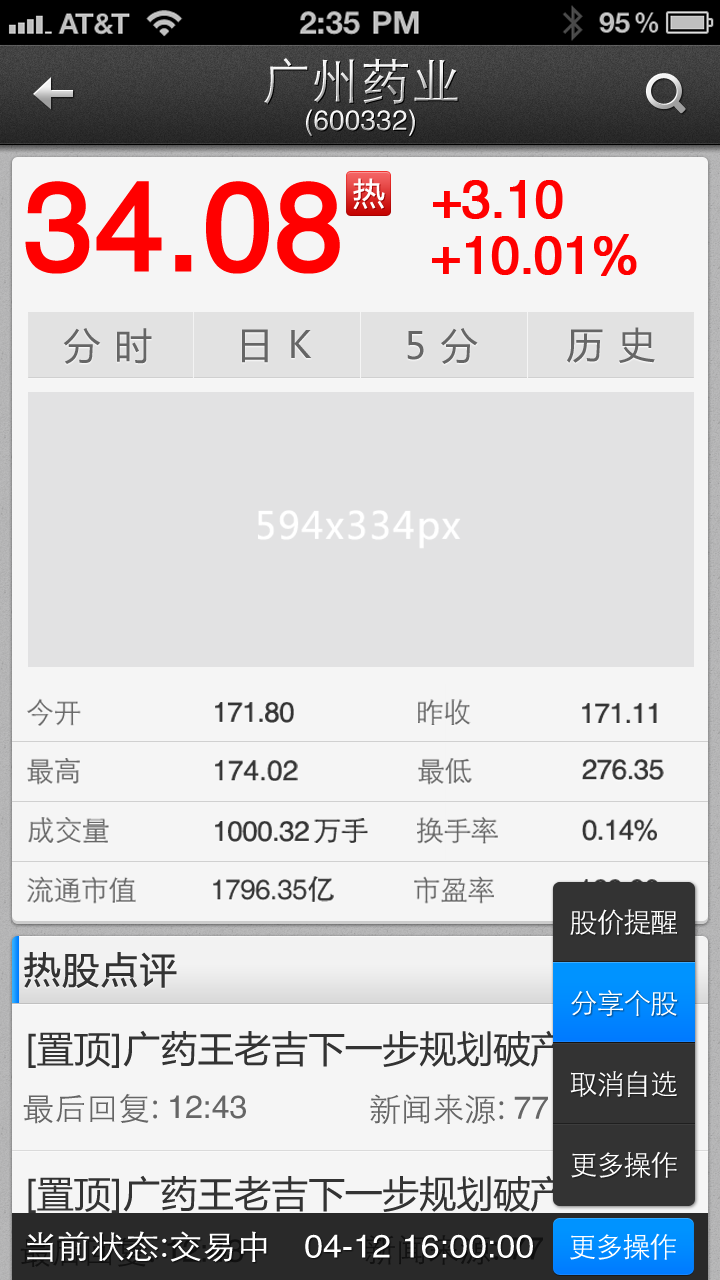
<style>
.page{position:relative;width:720px;height:1280px;background:#f5f5f5}
.page>*{position:absolute;margin:0}
.t1{font:50px "STXihei";letter-spacing:0.005em}
.t2{font:28px "HelveticaCE-Regular";letter-spacing:0.005em}
.t3{font:124px "HelveticaCE-Regular";letter-spacing:-0.01em;color:#ff0000;font-weight:bold}
.t4{font:32px "MicrosoftYaHei";letter-spacing:0.05em;color:#ffffff}
.t5{font:52px "HelveticaCE-Regular";letter-spacing:-0.025em;color:#ff0000;font-weight:bold}
.t6{font:37px "MicrosoftYaHei";letter-spacing:0.05em;color:#666666}
.t7{font:37.1px "MicrosoftYaHei";letter-spacing:0.05em;color:#ffffff}
.t8{font:28.1px "STXihei";letter-spacing:-0.025em;color:#676767}
.t9{font:28.1px "HelveticaCE-Regular";letter-spacing:-0.025em;color:#333333}
.t10{font:28.1px "STXihei";letter-spacing:-0.025em;color:#666666}
.t11{font:28.1px "HelveticaCE-Regular";color:#333333}
.t12{font:28.1px "STXihei";letter-spacing:-0.025em;color:#333333}
.t13{font:28.1px "AdobeHeitiStd-Regular";letter-spacing:-0.025em;color:#333333}
.t14{font:28px "STXihei";letter-spacing:-0.04em;color:#ffffff}
.t15{font:37px "MicrosoftYaHei";letter-spacing:0.05em;color:#333333}
.t16{font:37px "MicrosoftYaHei";color:#333333}
.t17{font:32px "STXihei";color:#666666}
.t18{font:32px "HelveticaCE-Regular";color:#666666}
.t19{font:32px "HelveticaCE-Regular";color:#1e64ab}
.t20{font:32.3px "STXihei";color:#ffffff;scale:1.05 1}
.t21{font:32.3px "HelveticaCE-Regular";color:#ffffff;scale:1.05 1}
.t22{font:28.1px "STXihei";letter-spacing:-0.04em;color:#ffffff}
</style>
<div class="page">
<p class="t1" style="left:264px;top:58px;width:194px;height:46px">广州药业</p>
<p class="t2" style="left:306px;top:109px;width:109px;height:27px">(600332)</p>
<p class="t3" style="left:25px;top:181px;width:315px;height:93px">34.08</p>
<p class="t4" style="left:353px;top:178px;width:32px;height:32px">热</p>
<p class="t5" style="left:433px;top:180px;width:130px;height:39px">+3.10</p>
<p class="t5" style="left:432px;top:234px;width:205px;height:42px">+10.01%</p>
<p class="t6" style="left:63px;top:328px;width:89px;height:36px">分 时</p>
<p class="t6" style="left:242px;top:329px;width:70px;height:34px">日 K</p>
<p class="t6" style="left:407px;top:328px;width:71px;height:36px">5 分</p>
<p class="t6" style="left:567px;top:327px;width:88px;height:36px">历 史</p>
<p class="t7" style="left:258px;top:510px;width:203px;height:39px">594x334px</p>
<p class="t8" style="left:27px;top:698px;width:54px;height:28px">今开</p>
<p class="t9" style="left:215px;top:702px;width:79px;height:21px">171.80</p>
<p class="t10" style="left:418px;top:699px;width:53px;height:26px">昨收</p>
<p class="t9" style="left:582px;top:703px;width:75px;height:20px">171.11</p>
<p class="t10" style="left:27px;top:758px;width:53px;height:27px">最高</p>
<p class="t11" style="left:215px;top:760px;width:83px;height:21px">174.02</p>
<p class="t10" style="left:418px;top:758px;width:54px;height:27px">最低</p>
<p class="t9" style="left:582px;top:759px;width:82px;height:21px">276.35</p>
<p class="t10" style="left:28px;top:817px;width:81px;height:26px">成交量</p>
<p class="t9" style="left:215px;top:821px;width:94px;height:21px">1000.32</p>
<p class="t12" style="left:314px;top:818px;width:54px;height:25px">万手</p>
<p class="t10" style="left:417px;top:816px;width:81px;height:28px">换手率</p>
<p class="t9" style="left:582px;top:818px;width:75px;height:24px">0.14%</p>
<p class="t10" style="left:27px;top:876px;width:109px;height:28px">流通市值</p>
<p class="t9" style="left:213px;top:876px;width:121px;height:26px">1796.35<span class="t13">亿</span></p>
<p class="t10" style="left:414px;top:876px;width:80px;height:28px">市盈率</p>
<p class="t14" style="left:570px;top:909px;width:107px;height:26px">股价提醒</p>
<p class="t15" style="left:24px;top:952px;width:153px;height:36px">热股点评</p>
<p class="t14" style="left:571px;top:990px;width:107px;height:26px">分享个股</p>
<p class="t16" style="left:28px;top:1030px;width:539px;height:38px">[置顶]广药王老吉下一步规划破产</p>
<p class="t14" style="left:570px;top:1071px;width:107px;height:26px">取消自选</p>
<p class="t17" style="left:23px;top:1093px;width:223px;height:31px">最后回复: <span class="t18">12:43</span></p>
<p class="t17" style="left:370px;top:1094px;width:178px;height:30px">新闻来源: <span class="t19">77</span></p>
<p class="t14" style="left:571px;top:1151px;width:106px;height:27px">更多操作</p>
<p class="t16" style="left:28px;top:1175px;width:539px;height:38px">[置顶]广药王老吉下一步规划破产</p>
<p class="t20" style="left:27px;top:1231px;width:240px;height:31px">当前状态:交易中</p>
<p class="t21" style="left:305px;top:1234px;width:85px;height:24px">04-12</p>
<p class="t21" style="left:405px;top:1234px;width:128px;height:24px">16:00:00</p>
<p class="t22" style="left:570px;top:1233px;width:106px;height:27px">更多操作</p>
</div>
